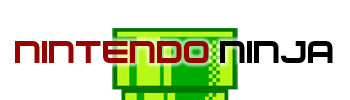
<style>
.page{position:relative;width:350px;height:100px;background:#ffffff}
.page>*{position:absolute;margin:0}
.t1{font:50px "NesController";color:#990000}
.t2{font:50px "NesController";color:#000000}
</style>
<div class="page">
<p class="t1" style="left:15px;top:41px;width:318px;height:22px">Nintendo<span class="t2"> Ninja</span></p>
</div>
